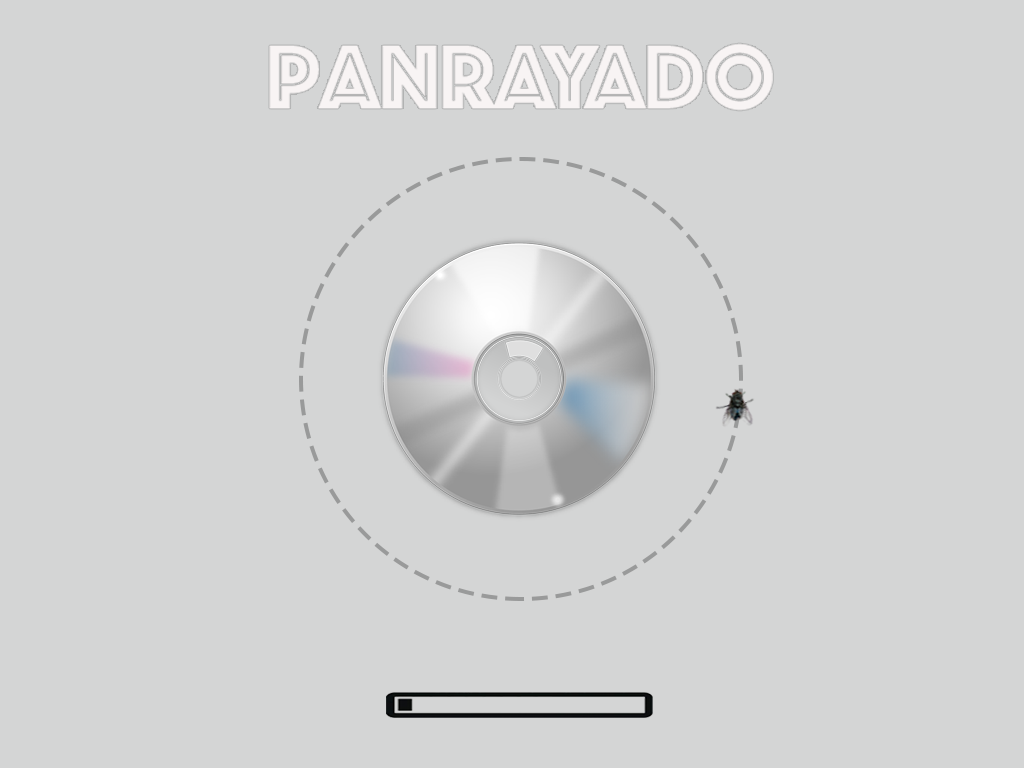
<style>
.page{position:relative;width:1024px;height:768px;background:#d4d5d5}
.page>*{position:absolute;margin:0}
.t1{font:94.2px "Phosphate-Inline";color:#f8f4f4}
</style>
<div class="page">
<p class="t1" style="left:269px;top:43px;width:504px;height:68px">Panrayado</p>
</div>
